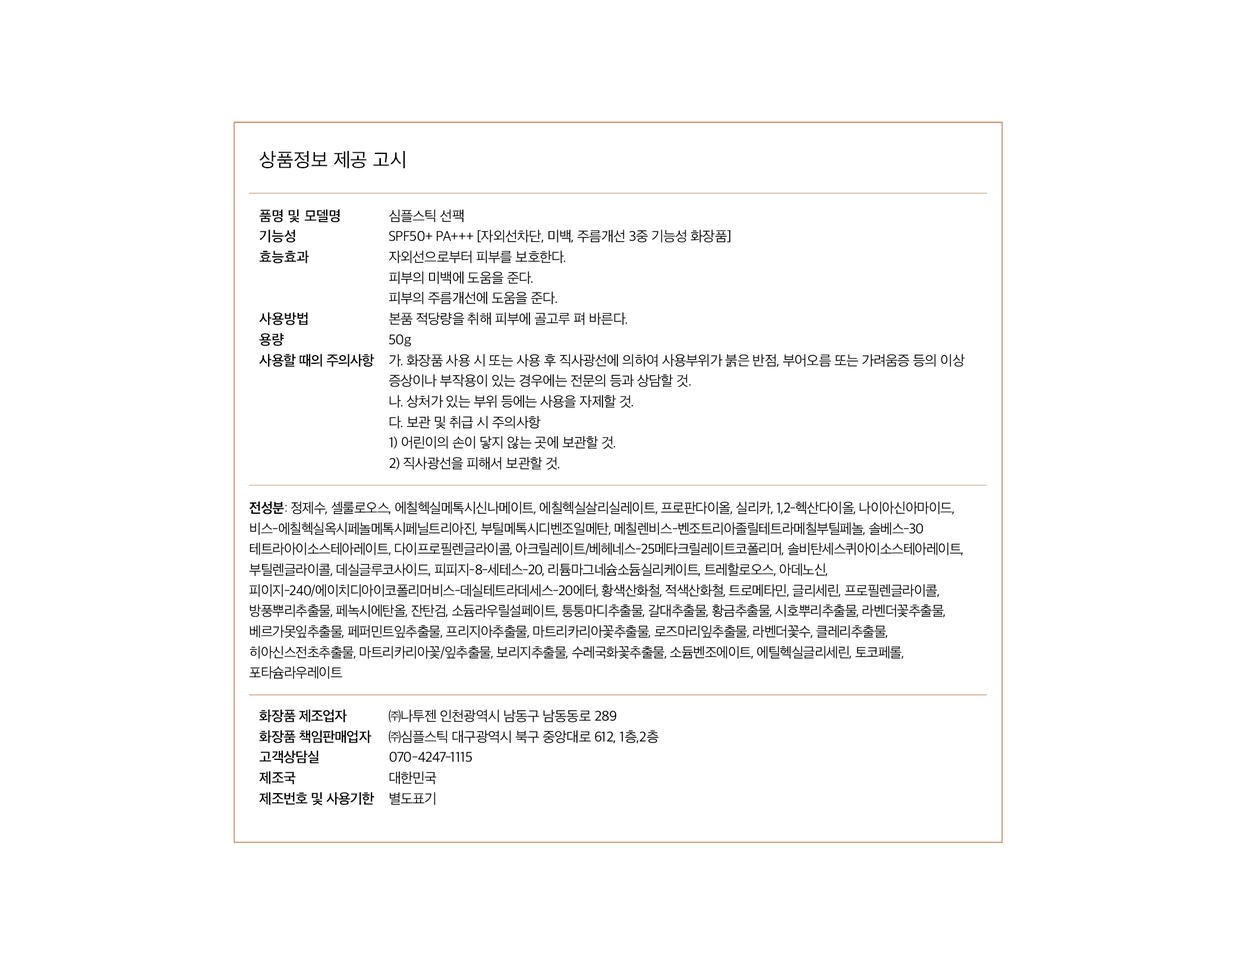
<style>
.page{position:relative;width:1236px;height:965px;background:#ffffff}
.page>*{position:absolute;margin:0}
.t1{font:18.7px "SDGothicNeoa-dRg";letter-spacing:-0.002em;color:#000000}
.t2{font:13.5px/20.6px "SDGothicNeoa-fSm";letter-spacing:-0.002em;color:#000000}
.t3{font:13.5px/20.6px "SDGothicNeoa-fSm";letter-spacing:-0.032em;color:#000000}
.t4{font:13.5px/20.6px "SDGothicNeoa-cLt";letter-spacing:-0.031em;color:#000000}
.t5{font:13.5px/20.6px "SDGothicNeoa-cLt";letter-spacing:-0.044em;color:#000000}
.t6{font:13.5px/20.6px "SDGothicNeoa-gBd";letter-spacing:-0.044em;color:#000000}
</style>
<div class="page">
<p class="t1" style="left:259px;top:150px;width:146px;height:18px">상품정보 제공 고시</p>
<p class="t2" style="left:259px;top:209px;width:115px;height:158px">품명 및 모델명<br>기능성<br>효능효과<br><br><br>사용방법<br>용량<br><span class="t3">사용할 때의 주의사항</span></p>
<p class="t4" style="left:389px;top:209px;width:576px;height:261px">심플스틱 선팩 <br>SPF50+ PA+++ [자외선차단, 미백, 주름개선 3중 기능성 화장품]<br>자외선으로부터 피부를 보호한다.<br>피부의 미백에 도움을 준다.<br>피부의 주름개선에 도움을 준다.<br>본품 적당량을 취해 피부에 골고루 펴 바른다.<br>50g<br>가. 화장품 사용 시 또는 사용 후 직사광선에 의하여 사용부위가 붉은 반점, 부어오름 또는 가려움증 등의 이상 증상이나 부작용이 있는 경우에는 전문의 등과 상담할 것.<br>나. 상처가 있는 부위 등에는 사용을 자제할 것.<br>다. 보관 및 취급 시 주의사항<br>1) 어린이의 손이 닿지 않는 곳에 보관할 것.<br>2) 직사광선을 피해서 보관할 것.</p>
<p class="t5" style="left:249px;top:501px;width:714px;height:178px"><span class="t6">전성분</span>: 정제수, 셀룰로오스, 에칠헥실메톡시신나메이트, 에칠헥실살리실레이트, 프로판다이올, 실리카, 1,2-헥산다이올, 나이아신아마이드, 비스-에칠헥실옥시페놀메톡시페닐트리아진, 부틸메톡시디벤조일메탄, 메칠렌비스-벤조트리아졸릴테트라메칠부틸페놀, 솔베스-30테트라아이소스테아레이트, 다이프로필렌글라이콜, 아크릴레이트/베헤네스-25메타크릴레이트코폴리머, 솔비탄세스퀴아이소스테아레이트, 부틸렌글라이콜, 데실글루코사이드, 피피지-8-세테스-20, 리튬마그네슘소듐실리케이트, 트레할로오스, 아데노신, 피이지-240/에이치디아이코폴리머비스-데실테트라데세스-20에터, 황색산화철, 적색산화철, 트로메타민, 글리세린, 프로필렌글라이콜, 방풍뿌리추출물, 페녹시에탄올, 잔탄검, 소듐라우릴설페이트, 퉁퉁마디추출물, 갈대추출물, 황금추출물, 시호뿌리추출물, 라벤더꽃추출물, 베르가못잎추출물, 페퍼민트잎추출물, 프리지아추출물, 마트리카리아꽃추출물, 로즈마리잎추출물, 라벤더꽃수, 클레리추출물, 히아신스전초추출물, 마트리카리아꽃/잎추출물, 보리지추출물, 수레국화꽃추출물, 소듐벤조에이트, 에틸헥실글리세린, 토코페롤, 포타슘라우레이트</p>
<p class="t3" style="left:259px;top:709px;width:115px;height:96px">화장품 제조업자<br>화장품 책임판매업자<br>고객상담실<br>제조국<br>제조번호 및 사용기한</p>
<p class="t4" style="left:389px;top:709px;width:270px;height:96px">㈜나투젠 인천광역시 남동구 남동동로 289<br>㈜심플스틱 대구광역시 북구 중앙대로 612, 1층,2층<br>070-4247-1115<br>대한민국<br>별도표기</p>
</div>
